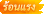
<style>
.page{position:relative;width:44px;height:14px}
.page>*{position:absolute;margin:0}
.t1{font:10px "Sarabun-Regular"}
</style>
<div class="page">
<p class="t1" style="left:3px;top:1px;width:33px;height:10px">ร้อนแรง</p>
</div>
